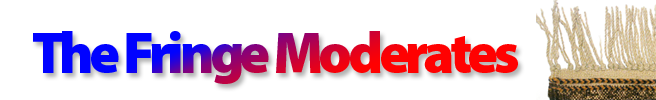
<style>
.page{position:relative;width:656px;height:100px;background:#ffffff}
.page>*{position:absolute;margin:0}
.t1{font:57.9px "MyriadPro-Black";letter-spacing:-0.08em}
</style>
<div class="page">
<p class="t1" style="left:33px;top:31px;width:485px;height:53px">The Fringe Moderates</p>
</div>
